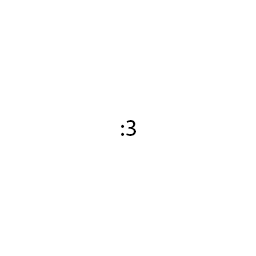
<style>
.page{position:relative;width:256px;height:256px;background:#ffffff}
.page>*{position:absolute;margin:0}
.t1{font:24px "MyriadPro-Regular";color:#000000}
</style>
<div class="page">
<p class="t1" style="left:121px;top:120px;width:15px;height:16px">:3</p>
</div>
